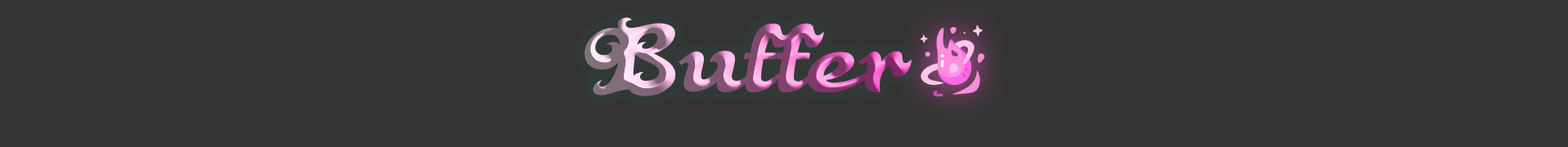
<style>
.page{position:relative;width:1568px;height:147px;background:#333333}
.page>*{position:absolute;margin:0}
.t1{font:108.8px "BlackRose";scale:1.2 1}
</style>
<div class="page">
<p class="t1" style="left:585px;top:17px;width:327px;height:79px">Buffer</p>
</div>
